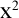
<style>
.page{position:relative;width:19px;height:18px;background:#ffffff}
.page>*{position:absolute;margin:0}
.t1{font:24px "TimesNewRomanPSMT";color:#000000}
</style>
<div class="page">
<p class="t1" style="left:0px;top:0px;width:19px;height:18px">x2</p>
</div>
